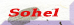
<style>
.page{position:relative;width:74px;height:25px}
.page>*{position:absolute;margin:0}
.t1{font:10.5px "PalatinoLinotype-Bold";color:#e10e0e;font-weight:bold;font-style:italic;scale:1.76 1}
</style>
<div class="page">
<p class="t1" style="left:8px;top:8px;width:51px;height:9px">Sohel</p>
</div>
